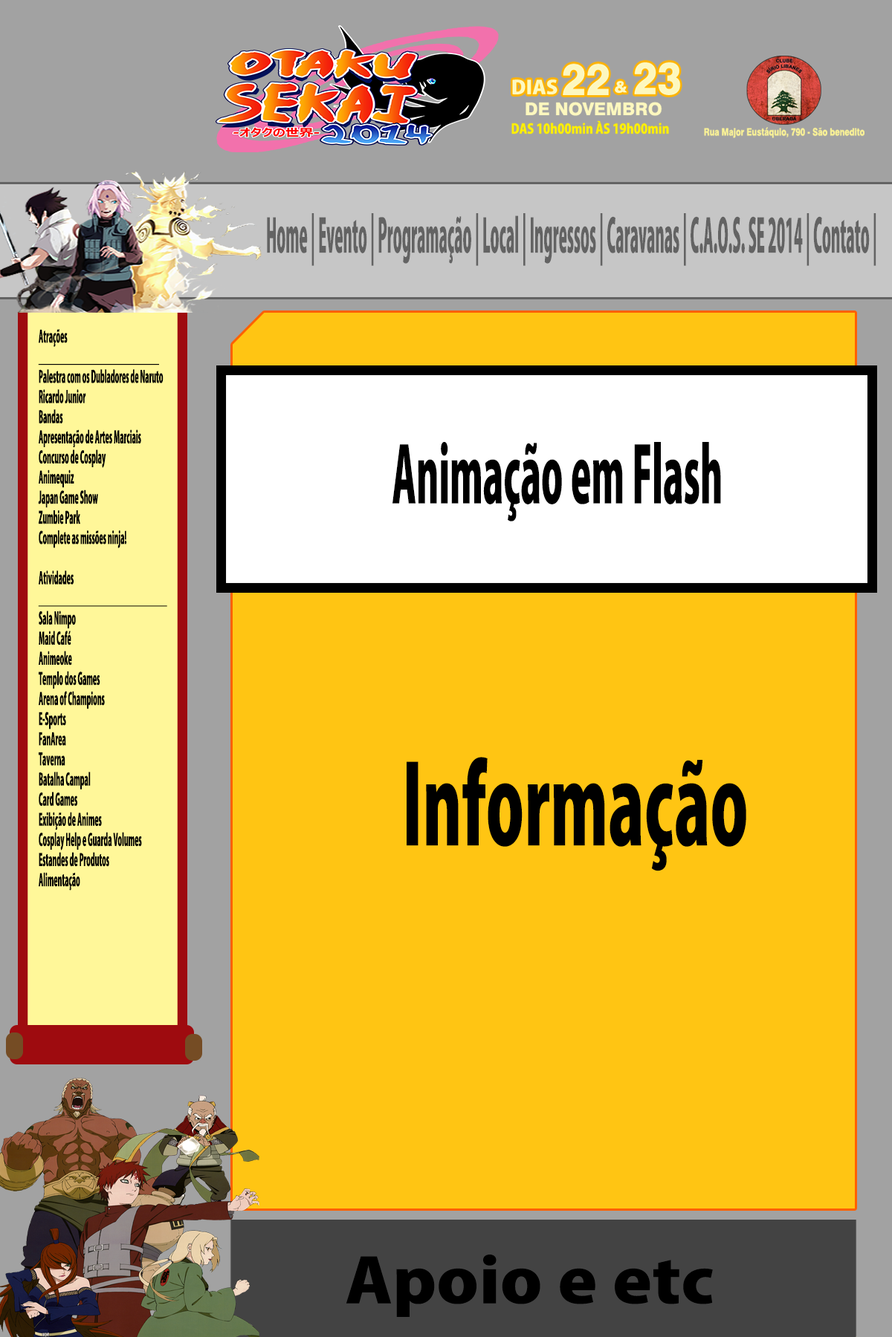
<style>
.page{position:relative;width:892px;height:1337px;background:#ffc513}
.page>*{position:absolute;margin:0}
.t1{font:45.7px "KozGoPr6N-Heavy";color:#636363;scale:0.33 1}
.t2{font:16.8px "KozGoPr6N-Heavy";color:#000000;scale:0.42 1}
.t3{font:76.3px "KozGoPr6N-Heavy";color:#000000;scale:0.48 1}
.t4{font:108px "KozGoPr6N-Heavy";color:#000000;scale:0.59 1}
.t5{font:60.4px "KozGoPr6N-Heavy";color:#000000;scale:1.18 1}
</style>
<div class="page">
<p class="t1" style="left:267px;top:213px;width:609px;height:53px">Home | Evento | Programação | Local | Ingressos | Caravanas | C.A.O.S. SE 2014 | Contato |</p>
<p class="t2" style="left:38px;top:329px;width:129px;height:562px">Atrações <br>______________________________<br>Palestra com os Dubladores de Naruto<br>Ricardo Junior<br>Bandas <br>Apresentação de Artes Marciais<br>Concurso de Cosplay<br>Animequiz <br>Japan Game Show<br>Zumbie Park<br>Complete as missões ninja!<br><br>Atividades <br>________________________________<br>Sala Nimpo<br>Maid Café<br>Animeoke<br>Templo dos Games<br>Arena of Champions<br>E-Sports<br>FanArea<br>Taverna <br>Batalha Campal<br>Card Games<br>Exibição de Animes<br>Cosplay Help e Guarda Volumes<br>Estandes de Produtos <br>Alimentação</p>
<p class="t3" style="left:392px;top:442px;width:329px;height:80px">Animação em Flash</p>
<p class="t4" style="left:406px;top:757px;width:340px;height:115px">Informação</p>
<p class="t5" style="left:345px;top:1255px;width:368px;height:62px">Apoio e etc</p>
</div>
